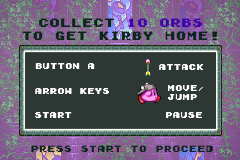
<style>
.page{position:relative;width:240px;height:160px;background:#2d3834}
.page>*{position:absolute;margin:0}
.t1{font:11px "GamegirlClassic";color:#0a271c}
.t2{font:11px "GamegirlClassic";color:#3f03a8}
.t3{font:7.5px "GamegirlClassic";color:#ffffff}
.t4{font:6px "GamegirlClassic";color:#ffffff}
.t5{font:8.3px "GamegirlClassic";color:#0a271c}
</style>
<div class="page">
<p class="t1" style="left:22px;top:18px;width:195px;height:22px;text-align:center">COLLECT <span class="t2">10 ORBS<br></span>TO GET KIRBY HOME!</p>
<p class="t3" style="left:35px;top:63px;width:60px;height:6px">BUTTON A</p>
<p class="t3" style="left:159px;top:64px;width:44px;height:6px">ATTACK</p>
<p class="t3" style="left:35px;top:88px;width:74px;height:6px">ARROW KEYS</p>
<p class="t3" style="left:168px;top:85px;width:35px;height:15px">MOVE<span class="t4">/<br></span>JUMP</p>
<p class="t3" style="left:35px;top:112px;width:37px;height:6px">START</p>
<p class="t3" style="left:166px;top:112px;width:36px;height:6px">PAUSE</p>
<p class="t5" style="left:31px;top:145px;width:182px;height:7px">PRESS START TO PROCEED</p>
</div>
